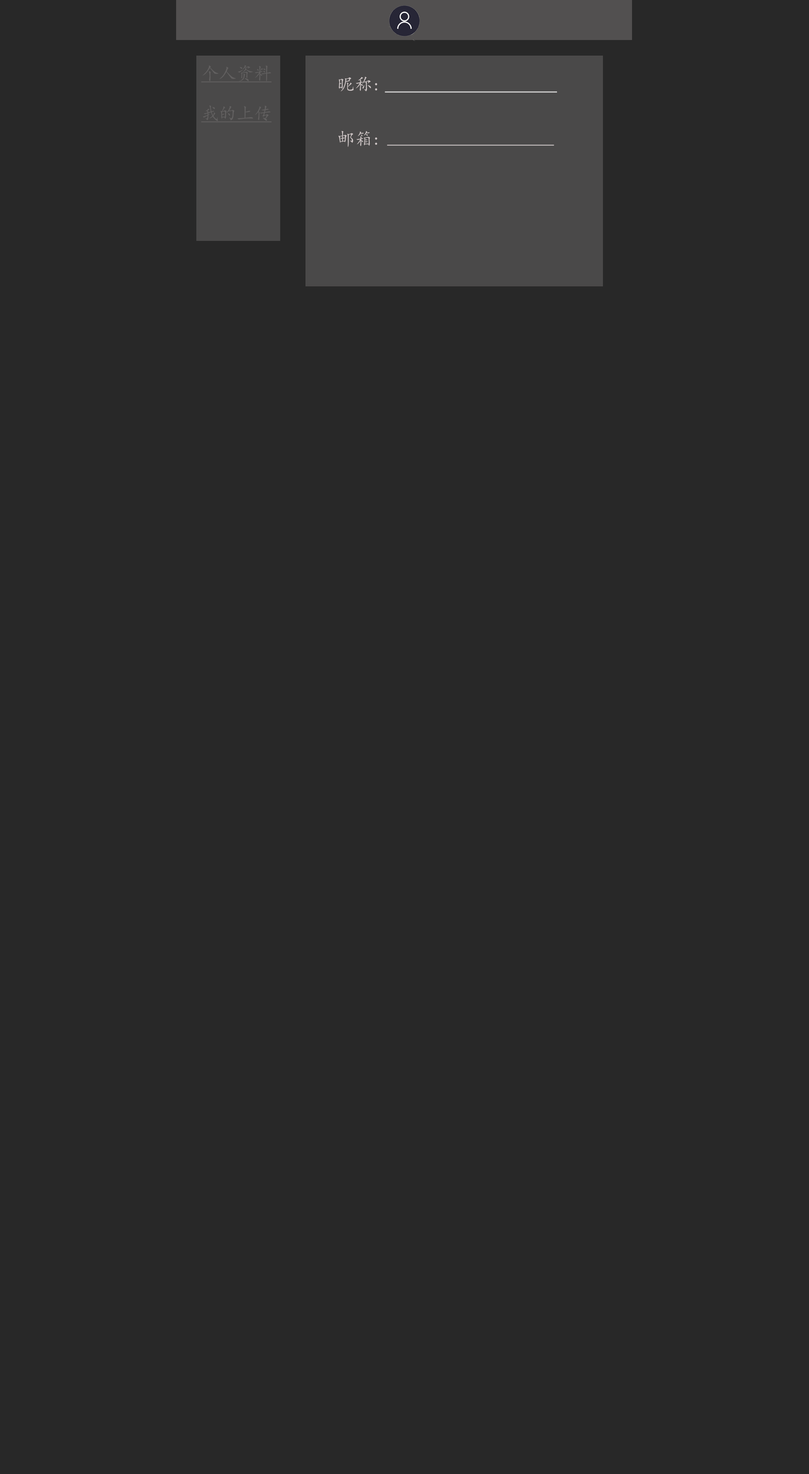
<style>
.page{position:relative;width:809px;height:1474px;background:#282828}
.page>*{position:absolute;margin:0}
.t1{font:17.6px "KaiTi";color:#626060;text-decoration:underline}
.t2{font:17.6px "KaiTi";color:#cdc5c5}
</style>
<div class="page">
<p class="t1" style="left:201px;top:65px;width:71px;height:18px">个人资料</p>
<p class="t2" style="left:339px;top:77px;width:38px;height:14px">昵称:</p>
<p class="t1" style="left:201px;top:105px;width:71px;height:18px">我的上传</p>
<p class="t2" style="left:338px;top:131px;width:39px;height:16px">邮箱:：</p>
</div>
